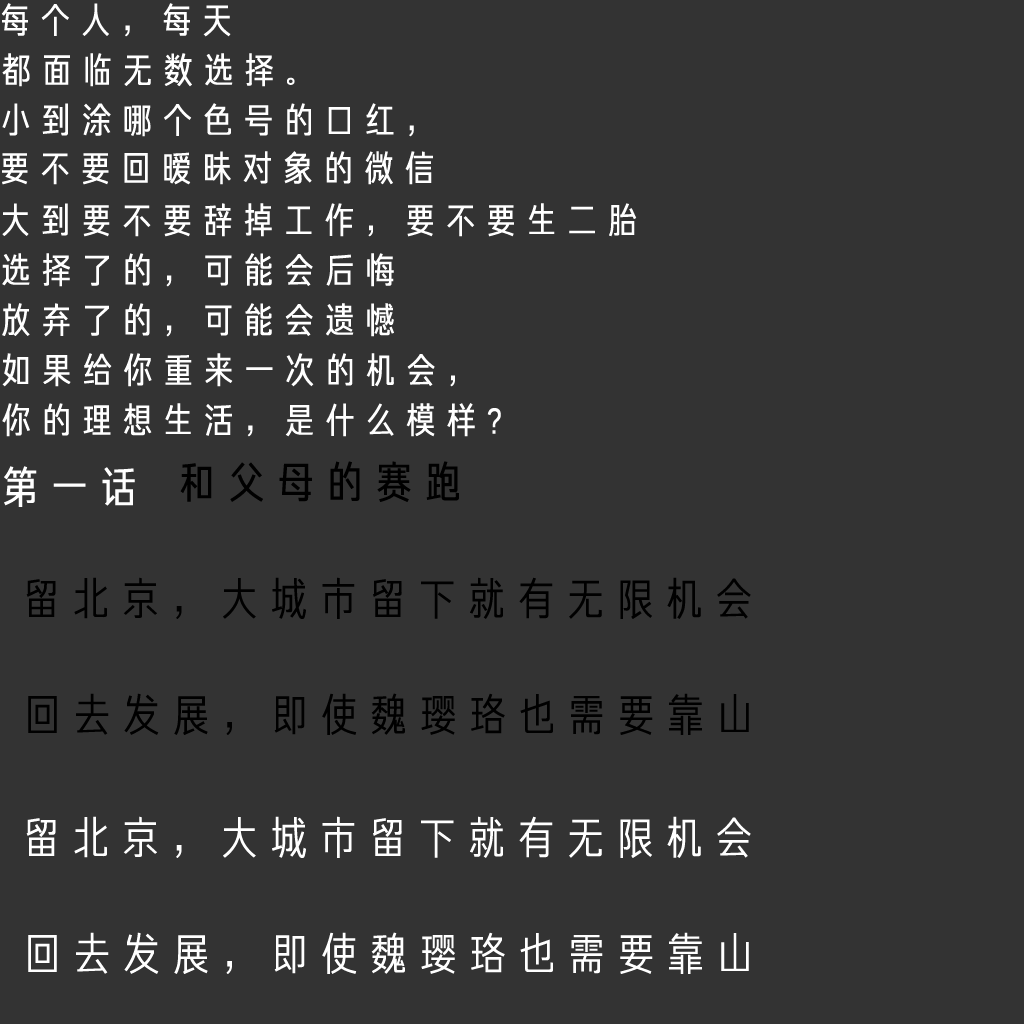
<style>
.page{position:relative;width:1024px;height:1024px;background:#333333}
.page>*{position:absolute;margin:0}
.t1{font:36px "FZJUNH_ZHUNJW--GB1-0";letter-spacing:0.3em;color:#ffffff}
.t2{font:44.4px "FZJUNH_ZHUNJW--GB1-0";letter-spacing:0.3em;color:#000000}
.t3{font:44.4px "FZJUNH_ZHUNJW--GB1-0";letter-spacing:0.3em;color:#ffffff}
.t4{font:45.2px "FZJHJW--GB1-0";letter-spacing:0.1em;color:#000000}
.t5{font:45.2px "FZJHJW--GB1-0";letter-spacing:0.1em;color:#ffffff}
</style>
<div class="page">
<p class="t1" style="left:1px;top:3px;width:230px;height:34px">每个人，每天</p>
<p class="t1" style="left:2px;top:53px;width:293px;height:34px">都面临无数选择。</p>
<p class="t1" style="left:2px;top:103px;width:412px;height:34px">小到涂哪个色号的口红，</p>
<p class="t1" style="left:2px;top:151px;width:431px;height:34px">要不要回暧昧对象的微信</p>
<p class="t1" style="left:2px;top:203px;width:635px;height:34px">大到要不要辞掉工作，要不要生二胎</p>
<p class="t1" style="left:2px;top:253px;width:392px;height:34px">选择了的，可能会后悔</p>
<p class="t1" style="left:2px;top:303px;width:392px;height:34px">放弃了的，可能会遗憾</p>
<p class="t1" style="left:2px;top:353px;width:453px;height:34px">如果给你重来一次的机会，</p>
<p class="t1" style="left:2px;top:403px;width:499px;height:34px">你的理想生活，是什么模样？</p>
<p class="t2" style="left:180px;top:461px;width:279px;height:41px">和父母的赛跑</p>
<p class="t3" style="left:4px;top:466px;width:131px;height:41px">第一话</p>
<p class="t4" style="left:26px;top:577px;width:725px;height:42px">留北京，大城市留下就有无限机会</p>
<p class="t4" style="left:28px;top:693px;width:721px;height:42px">回去发展，即使魏璎珞也需要靠山</p>
<p class="t5" style="left:26px;top:816px;width:725px;height:42px">留北京，大城市留下就有无限机会</p>
<p class="t5" style="left:28px;top:932px;width:721px;height:42px">回去发展，即使魏璎珞也需要靠山</p>
</div>
